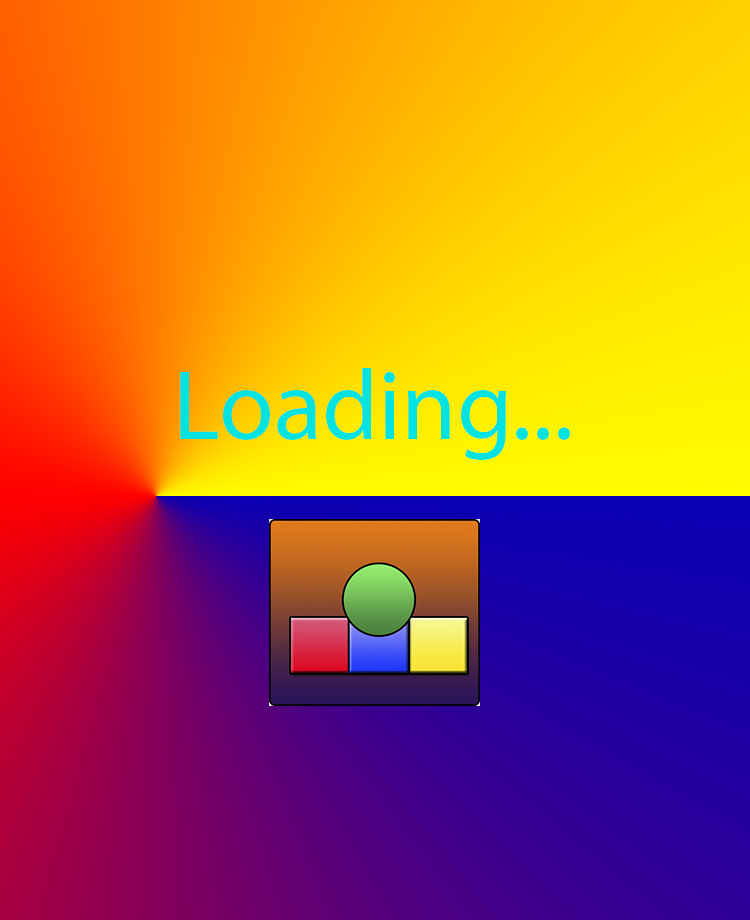
<style>
.page{position:relative;width:750px;height:920px}
.page>*{position:absolute;margin:0}
.t1{font:99.9px "MyriadPro-Regular";color:#00e3e0}
</style>
<div class="page">
<p class="t1" style="left:180px;top:368px;width:390px;height:92px">Loading...</p>
</div>
